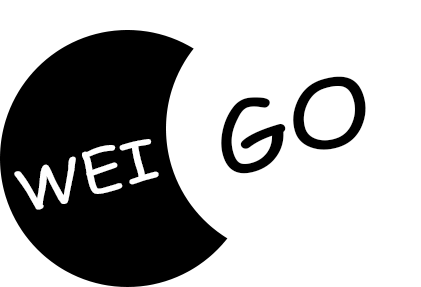
<style>
.page{position:relative;width:421px;height:287px;background:#ffffff}
.page>*{position:absolute;margin:0}
.t1{font:90.7px "ComicSansMS";color:#000000;scale:1.19 1}
.t2{font:55.4px "ComicSansMS";color:#ffffff;scale:1.19 1}
</style>
<div class="page">
<p class="t1" style="left:221px;top:76px;width:145px;height:98px;rotate:-16deg">GO</p>
<p class="t2" style="left:14px;top:139px;width:145px;height:71px;rotate:-15deg">WEI</p>
</div>
